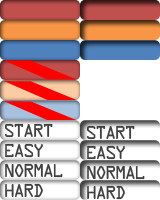
<style>
.page{position:relative;width:160px;height:200px;background:#ffffff}
.page>*{position:absolute;margin:0}
.t1{font:20px "DataControl";color:#404040}
</style>
<div class="page">
<p class="t1" style="left:4px;top:123px;width:49px;height:15px">START</p>
<p class="t1" style="left:86px;top:125px;width:49px;height:15px">START</p>
<p class="t1" style="left:5px;top:143px;width:38px;height:15px">easy</p>
<p class="t1" style="left:87px;top:145px;width:38px;height:15px">easy</p>
<p class="t1" style="left:5px;top:163px;width:58px;height:15px">normal</p>
<p class="t1" style="left:87px;top:165px;width:58px;height:15px">normal</p>
<p class="t1" style="left:5px;top:183px;width:38px;height:15px">Hard</p>
<p class="t1" style="left:87px;top:185px;width:38px;height:15px">Hard</p>
</div>
